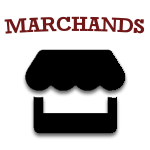
<style>
.page{position:relative;width:150px;height:150px;background:#ffffff}
.page>*{position:absolute;margin:0}
.t1{font:21.5px "Rockwell-Bold";letter-spacing:-0.05em;color:#701818}
</style>
<div class="page">
<p class="t1" style="left:4px;top:16px;width:141px;height:18px">MARCHANDS</p>
</div>
